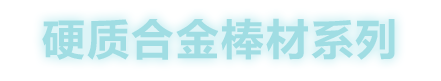
<style>
.page{position:relative;width:441px;height:81px;background:#ffffff}
.page>*{position:absolute;margin:0}
.t1{font:44.8px "FZLTCHJW--GB1-0";color:#a0dde3;text-transform:uppercase}
</style>
<div class="page">
<p class="t1" style="left:42px;top:18px;width:353px;height:42px">硬质合金棒材系列</p>
</div>
